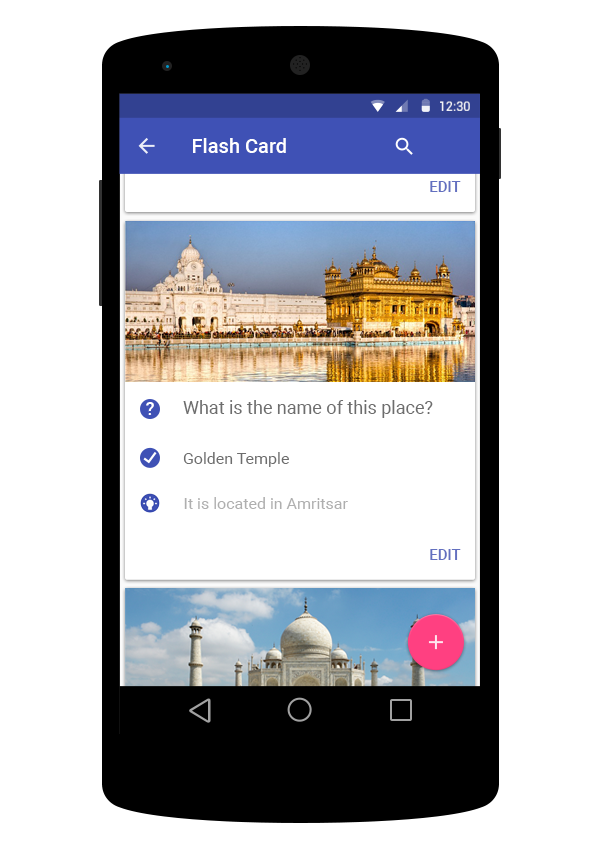
<style>
.page{position:relative;width:600px;height:857px;background:#ffffff}
.page>*{position:absolute;margin:0}
.t1{font:12.7px "Roboto-Regular";color:#ffffff}
.t2{font:20px "Roboto-Medium";color:#ffffff}
.t3{font:15px "Roboto-Medium";color:#6370c0}
.t4{font:18px "Roboto-Regular";color:#6d6d6d}
.t5{font:16px "Roboto-Regular";color:#6d6d6d}
.t6{font:16px "Roboto-Regular";color:#afafaf}
</style>
<div class="page">
<p class="t1" style="left:440px;top:101px;width:30px;height:10px">12:30</p>
<p class="t2" style="left:193px;top:138px;width:93px;height:15px">Flash Card</p>
<p class="t3" style="left:430px;top:181px;width:31px;height:11px">EDIT</p>
<p class="t4" style="left:183px;top:400px;width:250px;height:18px">What is the name of this place?</p>
<p class="t5" style="left:183px;top:452px;width:106px;height:15px">Golden Temple</p>
<p class="t6" style="left:184px;top:497px;width:164px;height:12px">It is located in Amritsar</p>
<p class="t3" style="left:430px;top:549px;width:31px;height:11px">EDIT</p>
</div>
